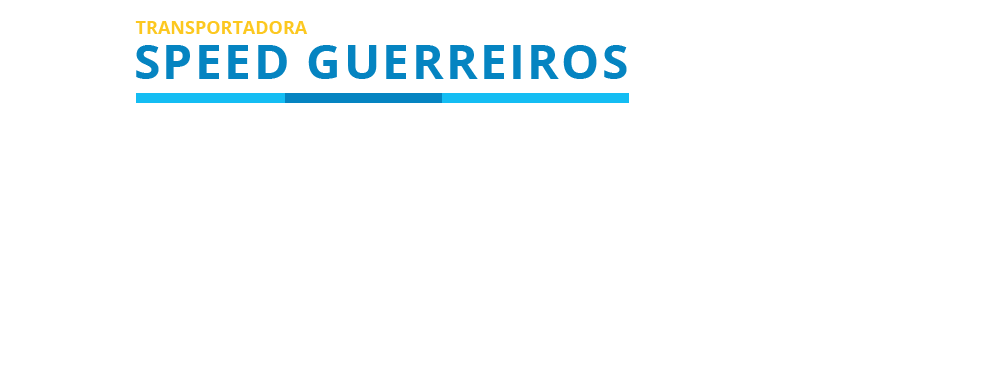
<style>
.page{position:relative;width:1000px;height:379px;background:#ffffff}
.page>*{position:absolute;margin:0}
.t1{font:18px "OpenSans-Bold";color:#fcc820}
.t2{font:48px "OpenSans-Bold";letter-spacing:0.05em;color:#0584c1}
</style>
<div class="page">
<p class="t1" style="left:135px;top:21px;width:173px;height:13px">TRANSPORTADORA</p>
<p class="t2" style="left:136px;top:45px;width:491px;height:34px">SPEED GUERREIROS</p>
</div>
